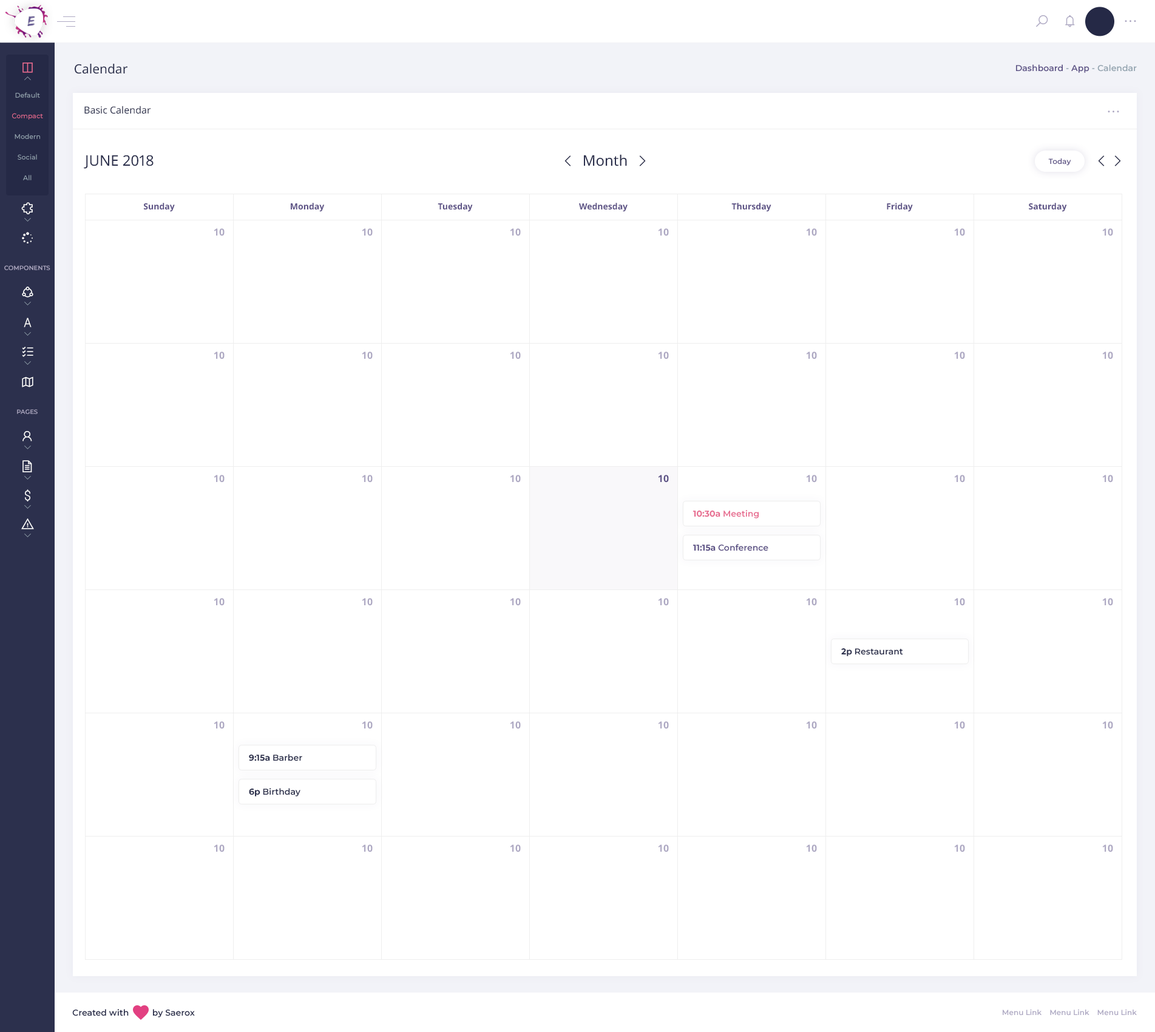
<style>
.page{position:relative;width:1155px;height:1032px;background:#ffffff}
.page>*{position:absolute;margin:0}
.t1{font:12.7px "NotoSans-Regular";color:#2c304d}
.t2{font:8.5px "Montserrat-SemiBold";color:#94a4b0}
.t3{font:8.5px "Montserrat-SemiBold";color:#5d5386}
.t4{font:6.7px/20.6px "Montserrat-Medium";color:#98a8b4}
.t5{font:6.7px/20.6px "Montserrat-Medium";color:#e76c90}
.t6{font:9.7px "NotoSans-Regular";color:#2c304d}
.t7{font:14.6px "NotoSans-Regular";color:#2c304d;text-transform:uppercase}
.t8{font:14.6px "NotoSans-Regular";color:#2c304d}
.t9{font:7.3px "Montserrat-SemiBold";color:#5d5386}
.t10{font:8.5px "NotoSans-Bold";color:#5d5386}
.t11{font:9.7px "NotoSans-Bold";color:#aea9c3}
.t12{font:6.1px "Montserrat-SemiBold";color:#aea9c3;text-transform:uppercase}
.t13{font:9.7px "NotoSans-Bold";color:#5d5386}
.t14{font:8.5px "Montserrat-SemiBold";color:#e76c90}
.t15{font:8.5px "Montserrat-Bold";color:#e76c90}
.t16{font:8.5px "Montserrat-Bold";color:#5d5386}
.t17{font:8.5px "Montserrat-SemiBold";color:#2c304d}
.t18{font:8.5px "Montserrat-Bold";color:#2c304d}
.t19{font:7.3px "Montserrat-SemiBold";color:#aea9c3}
</style>
<div class="page">
<p class="t1" style="left:75px;top:64px;width:52px;height:10px">Calendar</p>
<p class="t2" style="left:1016px;top:64px;width:121px;height:9px"><span class="t3">Dashboard</span> - <span class="t3">App</span> - Calendar</p>
<p class="t4" style="left:12px;top:92px;width:31px;height:88px;text-align:center">Default<br><span class="t5">Compact<br></span>Modern<br>Social<br>All</p>
<p class="t6" style="left:84px;top:106px;width:67px;height:8px">Basic Calendar</p>
<p class="t7" style="left:84px;top:155px;width:70px;height:14px">June 2018</p>
<p class="t8" style="left:584px;top:154px;width:43px;height:12px">Month</p>
<p class="t9" style="left:1048px;top:158px;width:24px;height:8px">Today</p>
<p class="t10" style="left:144px;top:203px;width:31px;height:9px">Sunday</p>
<p class="t10" style="left:291px;top:203px;width:34px;height:9px">Monday</p>
<p class="t10" style="left:438px;top:203px;width:35px;height:9px">Tuesday</p>
<p class="t10" style="left:579px;top:203px;width:49px;height:9px">Wednesday</p>
<p class="t10" style="left:732px;top:203px;width:40px;height:9px">Thursday</p>
<p class="t10" style="left:887px;top:203px;width:26px;height:9px">Friday</p>
<p class="t10" style="left:1029px;top:203px;width:38px;height:9px">Saturday</p>
<p class="t11" style="left:214px;top:228px;width:11px;height:8px">10</p>
<p class="t11" style="left:362px;top:228px;width:11px;height:8px">10</p>
<p class="t11" style="left:510px;top:228px;width:11px;height:8px">10</p>
<p class="t11" style="left:658px;top:228px;width:11px;height:8px">10</p>
<p class="t11" style="left:806px;top:228px;width:11px;height:8px">10</p>
<p class="t11" style="left:954px;top:228px;width:11px;height:8px">10</p>
<p class="t11" style="left:1103px;top:228px;width:10px;height:8px">10</p>
<p class="t12" style="left:4px;top:265px;width:46px;height:5px">Components</p>
<p class="t11" style="left:214px;top:352px;width:11px;height:7px">10</p>
<p class="t11" style="left:362px;top:352px;width:11px;height:7px">10</p>
<p class="t11" style="left:510px;top:352px;width:11px;height:7px">10</p>
<p class="t11" style="left:658px;top:352px;width:11px;height:7px">10</p>
<p class="t11" style="left:806px;top:352px;width:11px;height:7px">10</p>
<p class="t11" style="left:954px;top:352px;width:11px;height:7px">10</p>
<p class="t11" style="left:1103px;top:352px;width:10px;height:7px">10</p>
<p class="t12" style="left:17px;top:409px;width:21px;height:5px">Pages</p>
<p class="t11" style="left:214px;top:475px;width:11px;height:8px">10</p>
<p class="t11" style="left:362px;top:475px;width:11px;height:8px">10</p>
<p class="t11" style="left:510px;top:475px;width:11px;height:8px">10</p>
<p class="t13" style="left:658px;top:475px;width:11px;height:8px">10</p>
<p class="t11" style="left:806px;top:475px;width:11px;height:8px">10</p>
<p class="t11" style="left:954px;top:475px;width:11px;height:8px">10</p>
<p class="t11" style="left:1103px;top:475px;width:10px;height:8px">10</p>
<p class="t14" style="left:693px;top:510px;width:66px;height:8px"><span class="t15">10:30a</span> Meeting</p>
<p class="t3" style="left:693px;top:544px;width:76px;height:7px"><span class="t16">11:15a</span> Conference</p>
<p class="t11" style="left:214px;top:598px;width:11px;height:8px">10</p>
<p class="t11" style="left:362px;top:598px;width:11px;height:8px">10</p>
<p class="t11" style="left:510px;top:598px;width:11px;height:8px">10</p>
<p class="t11" style="left:658px;top:598px;width:11px;height:8px">10</p>
<p class="t11" style="left:806px;top:598px;width:11px;height:8px">10</p>
<p class="t11" style="left:954px;top:598px;width:11px;height:8px">10</p>
<p class="t11" style="left:1103px;top:598px;width:10px;height:8px">10</p>
<p class="t17" style="left:841px;top:648px;width:62px;height:8px"><span class="t18">2p</span> Restaurant</p>
<p class="t11" style="left:214px;top:721px;width:11px;height:8px">10</p>
<p class="t11" style="left:362px;top:721px;width:11px;height:8px">10</p>
<p class="t11" style="left:510px;top:721px;width:11px;height:8px">10</p>
<p class="t11" style="left:658px;top:721px;width:11px;height:8px">10</p>
<p class="t11" style="left:806px;top:721px;width:11px;height:8px">10</p>
<p class="t11" style="left:954px;top:721px;width:11px;height:8px">10</p>
<p class="t11" style="left:1103px;top:721px;width:10px;height:8px">10</p>
<p class="t17" style="left:249px;top:754px;width:53px;height:7px"><span class="t18">9:15a</span> Barber</p>
<p class="t17" style="left:249px;top:788px;width:52px;height:9px"><span class="t18">6p</span> Birthday</p>
<p class="t11" style="left:214px;top:845px;width:11px;height:7px">10</p>
<p class="t11" style="left:362px;top:845px;width:11px;height:7px">10</p>
<p class="t11" style="left:510px;top:845px;width:11px;height:7px">10</p>
<p class="t11" style="left:658px;top:845px;width:11px;height:7px">10</p>
<p class="t11" style="left:806px;top:845px;width:11px;height:7px">10</p>
<p class="t11" style="left:954px;top:845px;width:11px;height:7px">10</p>
<p class="t11" style="left:1103px;top:845px;width:10px;height:7px">10</p>
<p class="t17" style="left:72px;top:1009px;width:123px;height:9px">Created with          by Saerox</p>
<p class="t19" style="left:1003px;top:1009px;width:134px;height:7px">Menu Link    Menu Link    Menu Link</p>
</div>
